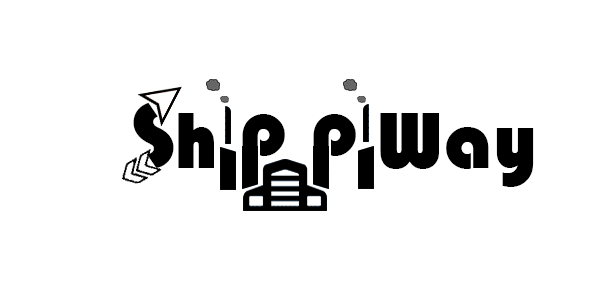
<style>
.page{position:relative;width:600px;height:300px;background:#ffffff}
.page>*{position:absolute;margin:0}
.t1{font:87.5px "Bauhaus93";color:#000000}
.t2{font:83.3px "Bauhaus93";color:#000000}
</style>
<div class="page">
<p class="t1" style="left:133px;top:102px;width:41px;height:66px;rotate:-34deg">S</p>
<p class="t2" style="left:178px;top:113px;width:36px;height:55px">h</p>
<p class="t2" style="left:380px;top:113px;width:154px;height:74px">Way</p>
<p class="t2" style="left:242px;top:114px;width:43px;height:56px">p</p>
<p class="t2" style="left:313px;top:114px;width:43px;height:56px">p</p>
</div>
